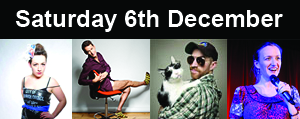
<style>
.page{position:relative;width:300px;height:119px;background:#060808}
.page>*{position:absolute;margin:0}
.t1{font:24px "Arial-BoldMT";color:#ffffff}
</style>
<div class="page">
<p class="t1" style="left:15px;top:10px;width:268px;height:22px">Saturday 6th December</p>
</div>
